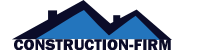
<style>
.page{position:relative;width:200px;height:50px;background:#ffffff}
.page>*{position:absolute;margin:0}
.t1{font:16px "FranklinGothic-Heavy";color:#0b0c29}
</style>
<div class="page">
<p class="t1" style="left:14px;top:39px;width:157px;height:12px">CONSTRUCTION-FIRM</p>
</div>
